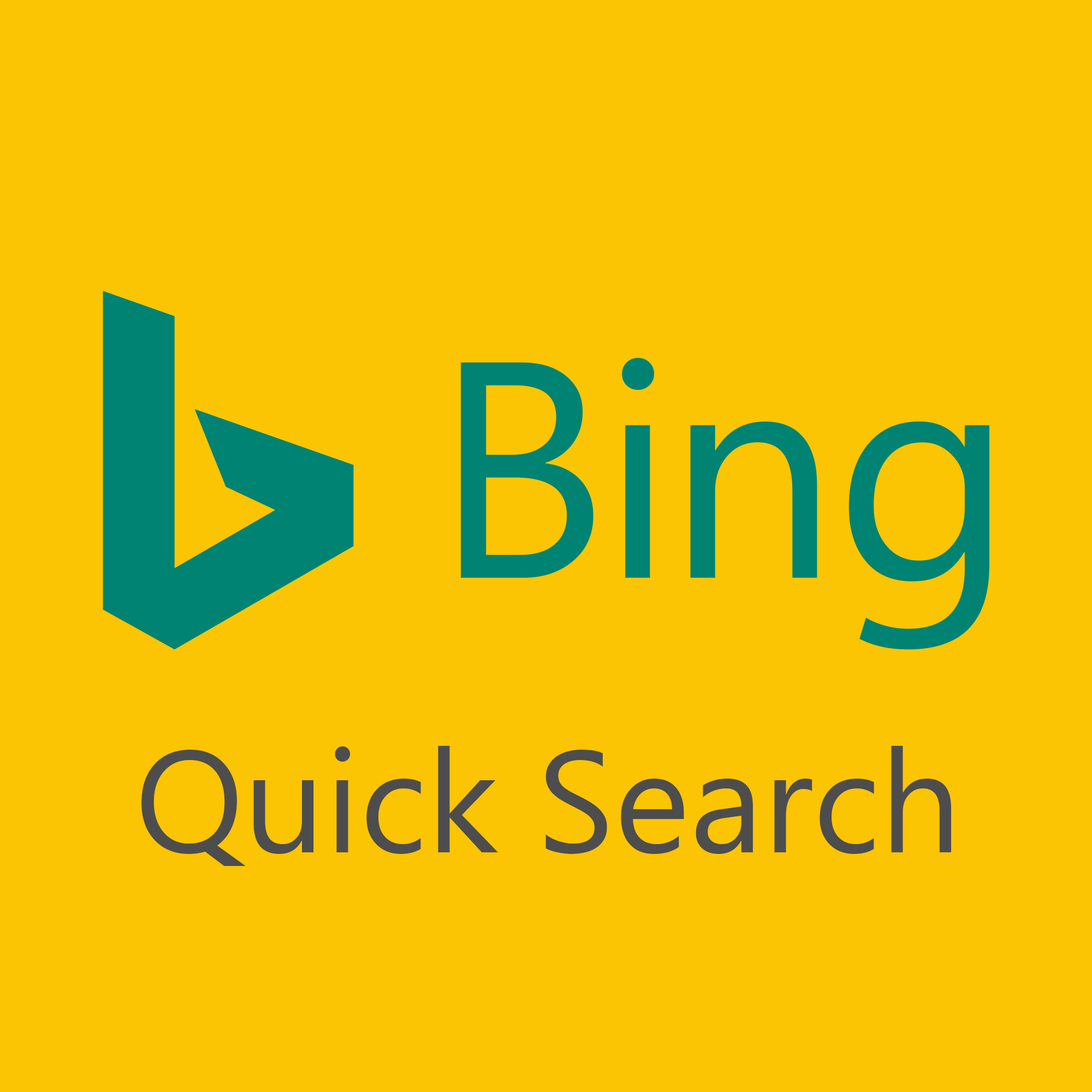
<style>
.page{position:relative;width:1092px;height:1092px;background:#fbc503}
.page>*{position:absolute;margin:0}
.t1{font:144.1px "SegoeUI";color:#4d4d4d}
</style>
<div class="page">
<p class="t1" style="left:141px;top:746px;width:810px;height:120px">Quick Search</p>
</div>
